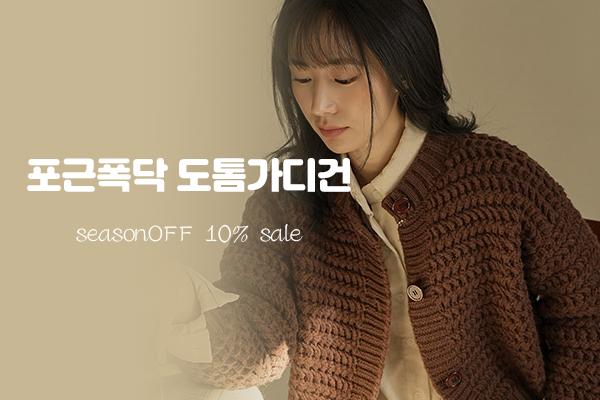
<style>
.page{position:relative;width:600px;height:400px}
.page>*{position:absolute;margin:0}
.t1{font:36px "Jalnan";letter-spacing:-0.025em;color:#ffffff}
.t2{font:24px "GabiaCheongyeon";letter-spacing:-0.025em;color:#ffffff}
</style>
<div class="page">
<p class="t1" style="left:27px;top:158px;width:324px;height:34px">포근폭닥 도톰가디건</p>
<p class="t2" style="left:76px;top:224px;width:227px;height:19px">seasonOFF 10% sale</p>
</div>
